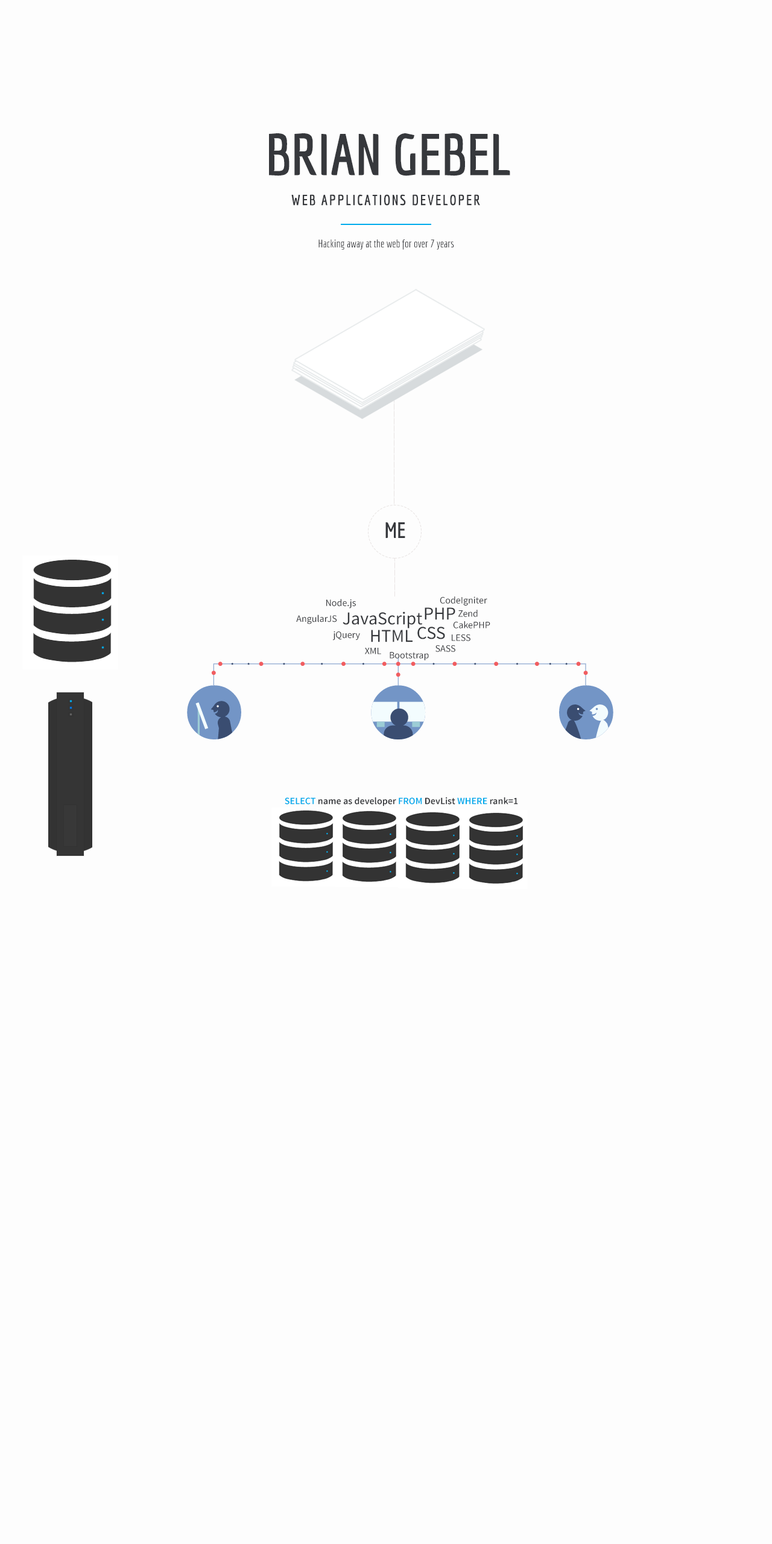
<style>
.page{position:relative;width:772px;height:1544px;background:#fdfdfd}
.page>*{position:absolute;margin:0}
.t1{font:57.3px "Economica-Bold";color:#36383c}
.t2{font:14.5px "Economica-Bold";letter-spacing:0.1em;color:#36383c}
.t3{font:10.9px "Economica-Regular";color:#36383c}
.t4{font:21.7px "Economica-Bold";color:#36383c}
.t5{font:9.7px "SourceSansPro-Regular";color:#36383c}
.t6{font:18.1px "SourceSansPro-Regular";color:#36383c}
.t7{font:9.7px "SourceSansPro-Semibold";color:#36383c}
.t8{font:9.7px "SourceSansPro-Semibold";color:#00abec}
</style>
<div class="page">
<p class="t1" style="left:269px;top:133px;width:241px;height:43px">BRIAN GEBEL</p>
<p class="t2" style="left:291px;top:194px;width:189px;height:12px">WEB APPLICATIONS DEVELOPER</p>
<p class="t3" style="left:319px;top:239px;width:135px;height:11px">Hacking away at the web for over 7 years</p>
<p class="t4" style="left:385px;top:522px;width:20px;height:16px">ME</p>
<p class="t5" style="left:326px;top:599px;width:30px;height:10px">Node.js</p>
<p class="t5" style="left:440px;top:597px;width:47px;height:9px">CodeIgniter</p>
<p class="t5" style="left:296px;top:615px;width:41px;height:9px">AngularJS</p>
<p class="t6" style="left:343px;top:612px;width:79px;height:17px">JavaScript</p>
<p class="t6" style="left:425px;top:607px;width:30px;height:13px">PHP</p>
<p class="t5" style="left:458px;top:610px;width:20px;height:7px">Zend</p>
<p class="t6" style="left:371px;top:630px;width:42px;height:12px">HTML</p>
<p class="t6" style="left:417px;top:627px;width:28px;height:12px">CSS</p>
<p class="t5" style="left:453px;top:621px;width:37px;height:8px">CakePHP</p>
<p class="t5" style="left:332px;top:631px;width:28px;height:10px">jQuery</p>
<p class="t5" style="left:452px;top:634px;width:19px;height:7px">LESS</p>
<p class="t5" style="left:365px;top:648px;width:16px;height:7px">XML</p>
<p class="t5" style="left:390px;top:652px;width:39px;height:9px">Bootstrap</p>
<p class="t5" style="left:436px;top:645px;width:19px;height:7px">SASS</p>
<p class="t7" style="left:285px;top:797px;width:233px;height:10px"><span class="t8">SELECT </span>name as developer <span class="t8">FROM </span>DevList <span class="t8">WHERE </span>rank=1</p>
</div>
